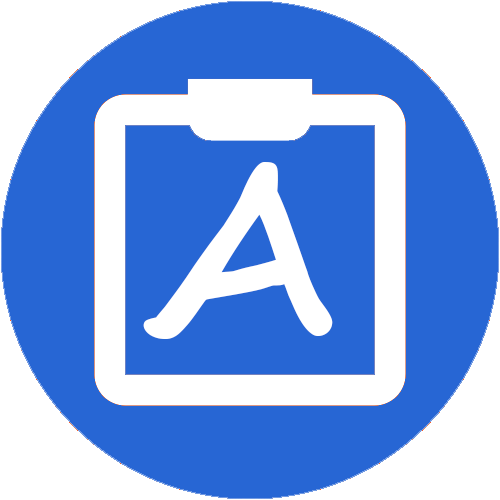
<style>
.page{position:relative;width:500px;height:500px;background:#2766d4}
.page>*{position:absolute;margin:0}
.t1{font:233.3px "SegoeScript-Bold";color:#ffffff}
</style>
<div class="page">
<p class="t1" style="left:143px;top:162px;width:190px;height:177px">A</p>
</div>
